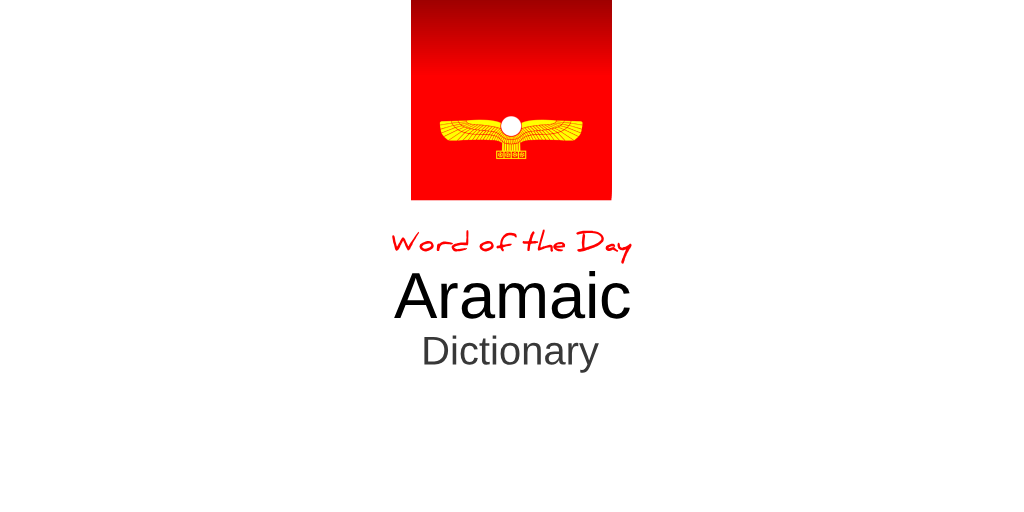
<style>
.page{position:relative;width:1024px;height:512px;background:#ffffff}
.page>*{position:absolute;margin:0}
.t1{font:25px "Daniel-Bold";color:#ff0000}
.t2{font:65px "ArialMT";color:#000000}
.t3{font:40px "ArialMT";color:#383838}
</style>
<div class="page">
<p class="t1" style="left:392px;top:229px;width:240px;height:35px">Word of the Day</p>
<p class="t2" style="left:394px;top:270px;width:236px;height:49px">Aramaic</p>
<p class="t3" style="left:424px;top:335px;width:175px;height:38px">Dictionary</p>
</div>
